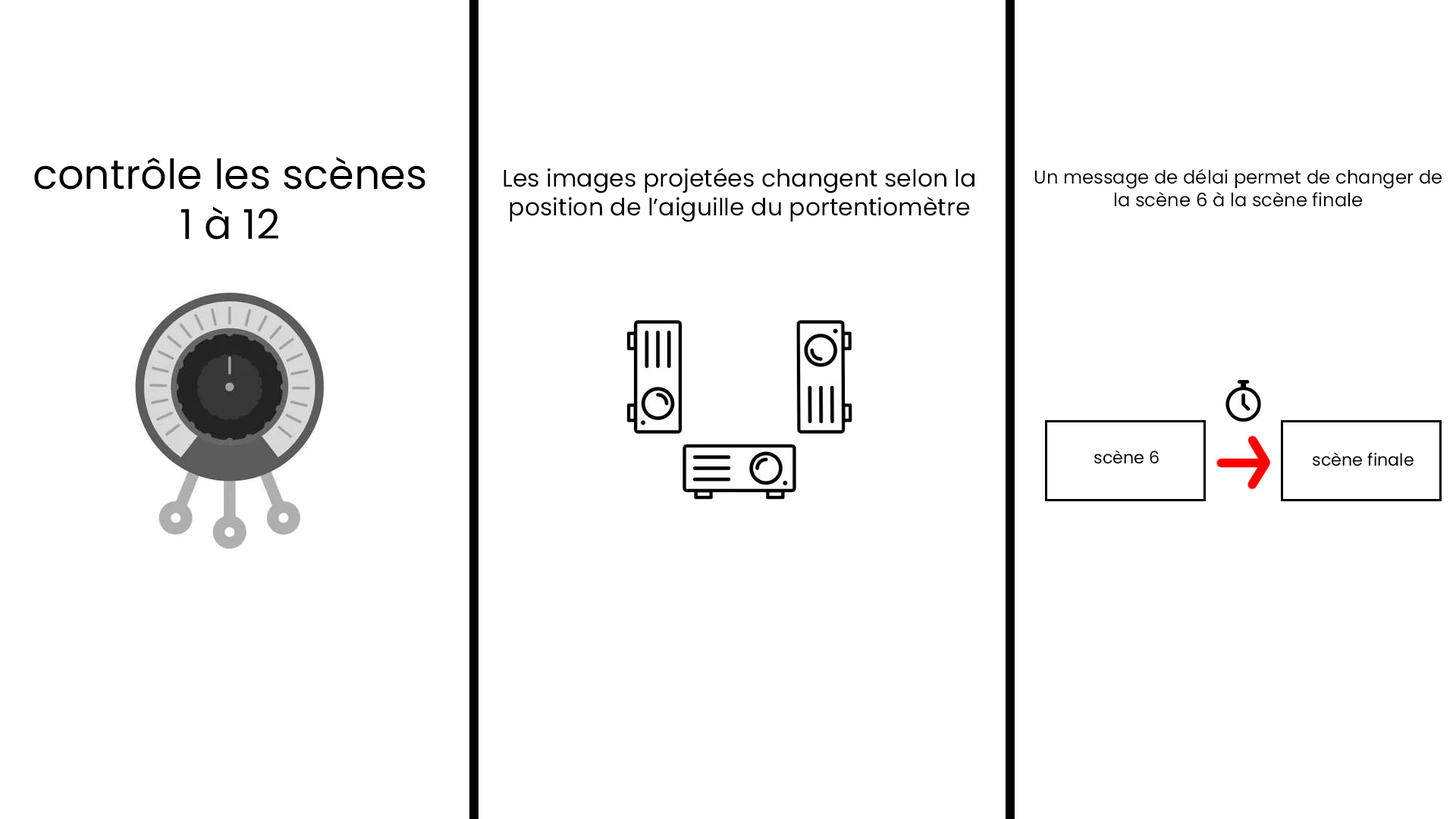
<style>
.page{position:relative;width:1456px;height:819px;background:#ffffff}
.page>*{position:absolute;margin:0}
.t1{font:41.2px "Poppins-Regular";color:#000000}
.t2{font:23.9px "Poppins-Regular";color:#000000}
.t3{font:18.5px "Poppins-Regular";color:#000000}
.t4{font:16.9px "Poppins-Regular";color:#000000}
</style>
<div class="page">
<p class="t1" style="left:34px;top:156px;width:391px;height:84px;text-align:center">contrôle les scènes<br>1 à 12</p>
<p class="t2" style="left:504px;top:168px;width:470px;height:54px;text-align:center">Les images projetées changent selon la<br>position de l’aiguille du portentiomètre</p>
<p class="t3" style="left:1034px;top:169px;width:408px;height:38px;text-align:center">Un message de délai permet de changer de<br>la scène 6 à la scène finale</p>
<p class="t4" style="left:1094px;top:450px;width:65px;height:14px">scène 6</p>
<p class="t4" style="left:1313px;top:452px;width:101px;height:14px">scène finale</p>
</div>
